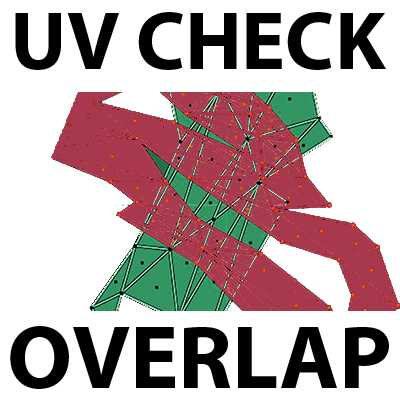
<style>
.page{position:relative;width:400px;height:400px;background:#ffffff}
.page>*{position:absolute;margin:0}
.t1{font:82.4px "MyriadPro-Bold";color:#000000}
.t2{font:91.1px "MyriadPro-Bold";color:#000000}
</style>
<div class="page">
<p class="t1" style="left:15px;top:12px;width:371px;height:58px">UV CHECK</p>
<p class="t2" style="left:10px;top:326px;width:379px;height:63px">OVERLAP</p>
</div>
